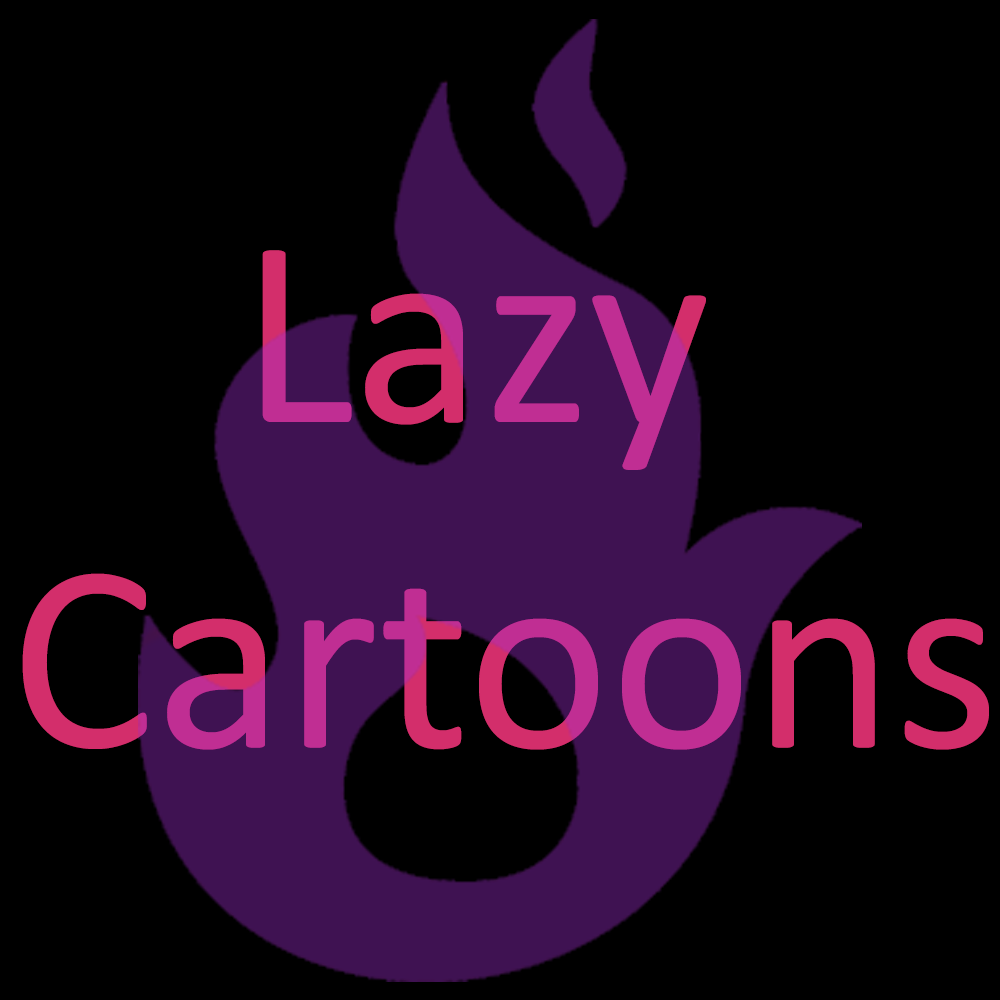
<style>
.page{position:relative;width:1000px;height:1000px;background:#000000}
.page>*{position:absolute;margin:0}
.t1{font:270.7px "Calibri"}
</style>
<div class="page">
<p class="t1" style="left:22px;top:250px;width:967px;height:500px;text-align:center">Lazy <br>Cartoons</p>
</div>
